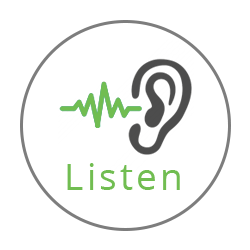
<style>
.page{position:relative;width:250px;height:250px;background:#ffffff}
.page>*{position:absolute;margin:0}
.t1{font:37.2px "OpenSans";letter-spacing:0.08em;color:#71bd51}
</style>
<div class="page">
<p class="t1" style="left:67px;top:163px;width:113px;height:27px">Listen</p>
</div>
